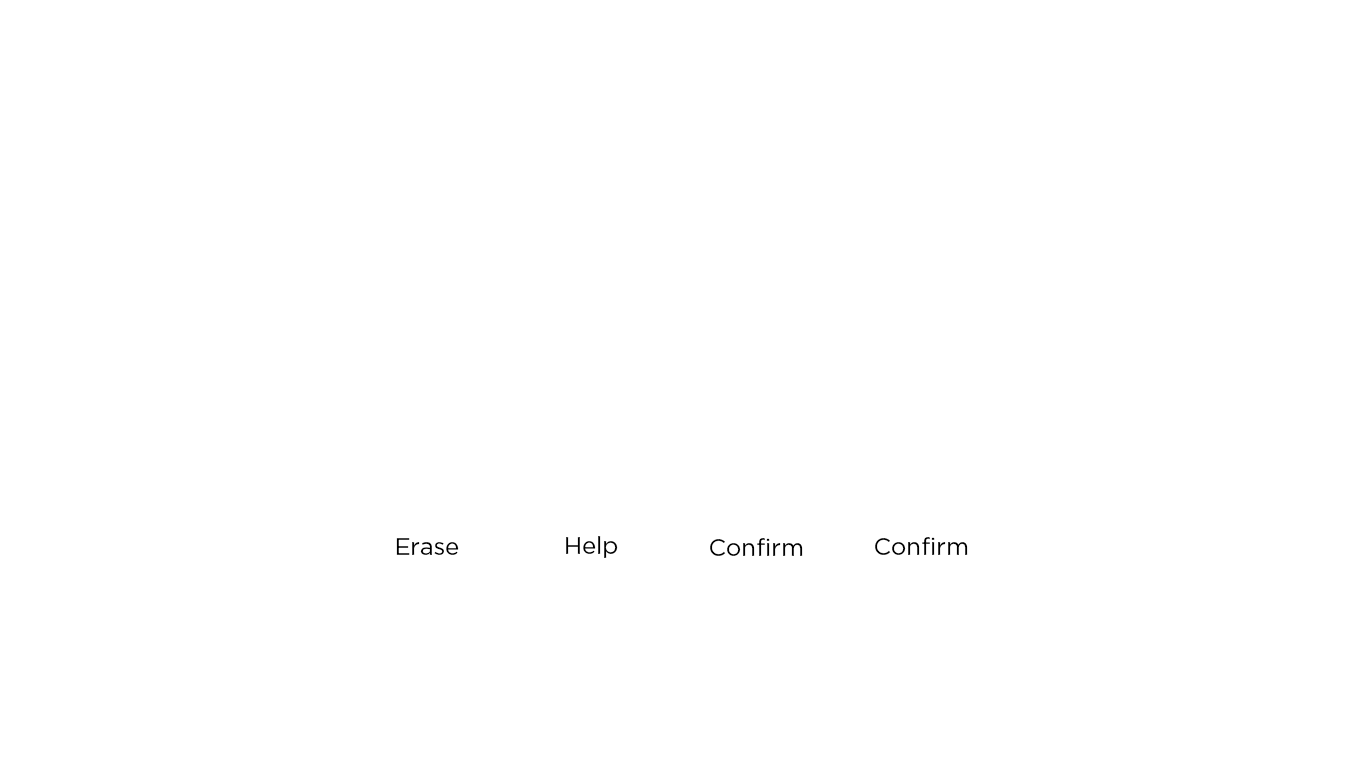
<style>
.page{position:relative;width:1366px;height:769px;background:#ffffff}
.page>*{position:absolute;margin:0}
.t1{font:24px "GothamPro";color:#000000}
</style>
<div class="page">
<p class="t1" style="left:396px;top:538px;width:63px;height:17px">Erase</p>
<p class="t1" style="left:566px;top:536px;width:52px;height:22px">Help</p>
<p class="t1" style="left:710px;top:538px;width:93px;height:18px">Confirm</p>
<p class="t1" style="left:875px;top:537px;width:93px;height:18px">Confirm</p>
</div>
